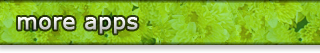
<style>
.page{position:relative;width:320px;height:53px}
.page>*{position:absolute;margin:0}
.t1{font:22px "Verdana";font-weight:bold}
</style>
<div class="page">
<p class="t1" style="left:18px;top:17px;width:120px;height:17px">more apps</p>
</div>
